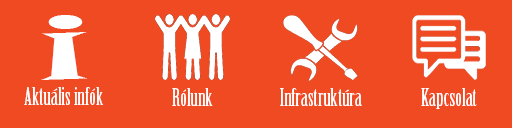
<style>
.page{position:relative;width:512px;height:128px;background:#f04a23}
.page>*{position:absolute;margin:0}
.t1{font:90px "SnapITC-Regular";color:#ffffff}
.t2{font:24px "BirchStd";color:#ffffff}
</style>
<div class="page">
<p class="t1" style="left:41px;top:15px;width:46px;height:65px">i</p>
<p class="t2" style="left:24px;top:87px;width:80px;height:18px">Aktuális infók</p>
<p class="t2" style="left:172px;top:88px;width:41px;height:18px">Rólunk</p>
<p class="t2" style="left:280px;top:88px;width:82px;height:18px">Infrastruktúra</p>
<p class="t2" style="left:421px;top:88px;width:56px;height:21px">Kapcsolat</p>
</div>
